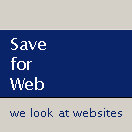
<style>
.page{position:relative;width:132px;height:132px;background:#0a246a}
.page>*{position:absolute;margin:0}
.t1{font:16.8px "LucidaSansUnicode";color:#ffffff}
.t2{font:12px "LucidaSansUnicode";color:#0a246a}
</style>
<div class="page">
<p class="t1" style="left:10px;top:38px;width:36px;height:52px">Save<br>for<br>Web</p>
<p class="t2" style="left:10px;top:108px;width:112px;height:9px">we look at websites</p>
</div>
